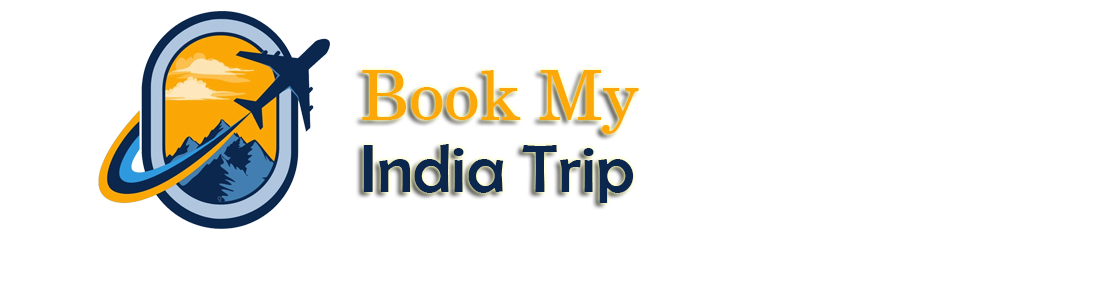
<style>
.page{position:relative;width:1094px;height:281px;background:#ffffff}
.page>*{position:absolute;margin:0}
.t1{font:69.3px "CenturySchlbkCyrillicBT-Roman";color:#fca808}
.t2{font:69.3px "BerlinSansFB-Reg";color:#0b274d}
</style>
<div class="page">
<p class="t1" style="left:362px;top:70px;width:277px;height:64px">Book My</p>
<p class="t2" style="left:363px;top:144px;width:271px;height:59px">India Trip</p>
</div>
